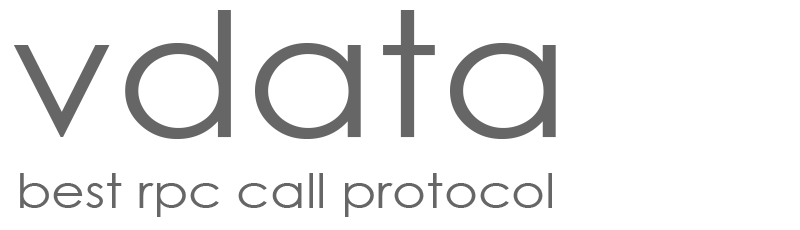
<style>
.page{position:relative;width:800px;height:230px;background:#ffffff}
.page>*{position:absolute;margin:0}
.t1{font:172.7px "CenturyGothic";color:#666666;scale:1.1 1}
.t2{font:47.2px "CenturyGothic";color:#666666;scale:1.1 1}
</style>
<div class="page">
<p class="t1" style="left:13px;top:10px;width:543px;height:129px">vdata</p>
<p class="t2" style="left:20px;top:173px;width:532px;height:44px">best rpc call protocol</p>
</div>
